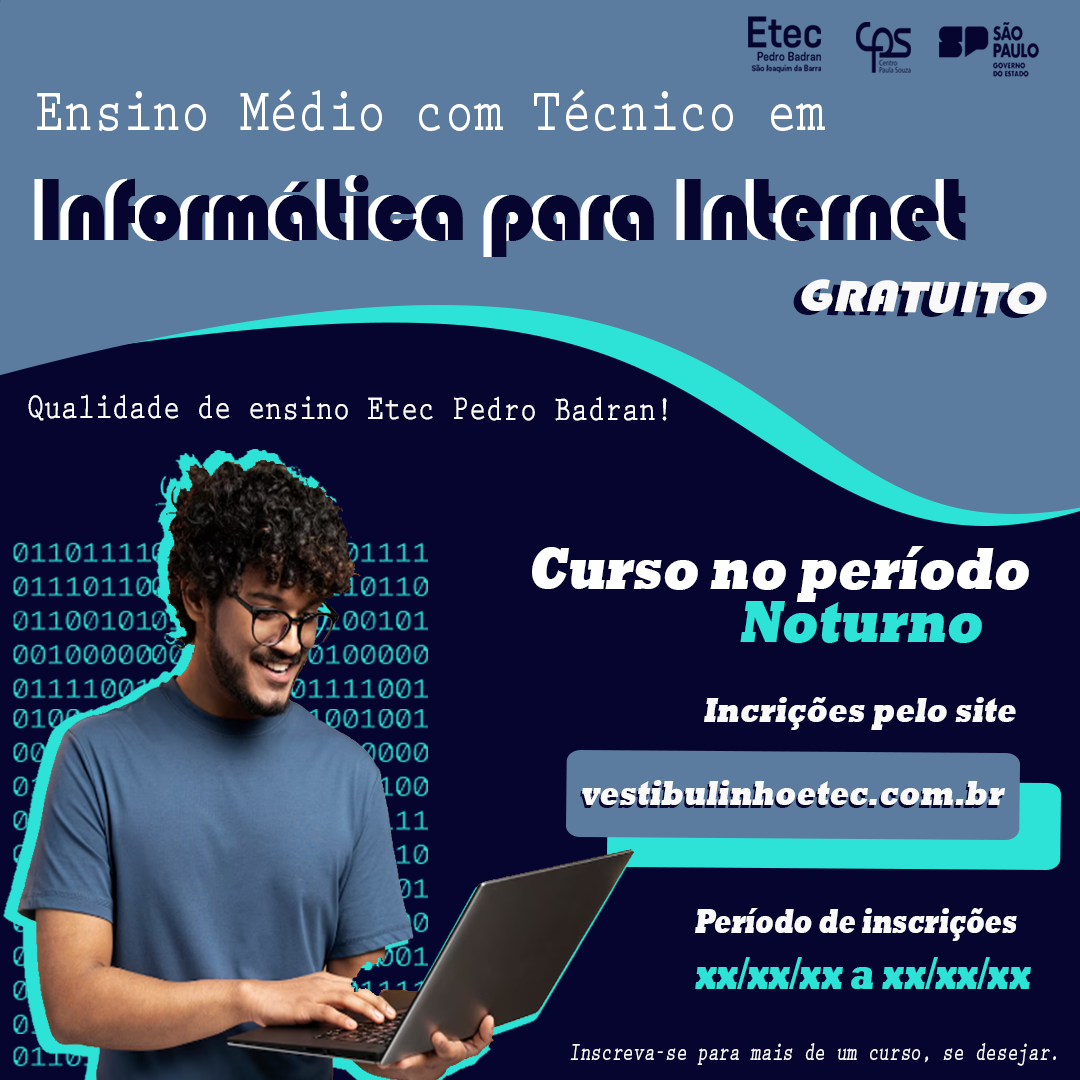
<style>
.page{position:relative;width:1080px;height:1080px;background:#06052f}
.page>*{position:absolute;margin:0}
.t1{font:61px "PrestigeEliteStd-Bd";color:#ffffff;scale:0.8 1}
.t2{font:91.4px "Bauhaus93";color:#06052f;scale:0.9 1}
.t3{font:45.7px "Bauhaus93";color:#f9f9f9;font-style:italic;scale:1.2 1}
.t4{font:35.6px "PrestigeEliteStd-Bd";color:#ffffff;scale:0.8 1}
.t5{font:61px "Rockwell-ExtraBold";color:#ffffff;font-style:italic;scale:0.8 1}
.t6{font:61px "Rockwell-ExtraBold";color:#2de3d8;font-style:italic;scale:0.8 1}
.t7{font:35.6px "Rockwell-ExtraBold";color:#f9f9f9;font-style:italic;scale:0.8 1}
.t8{font:35.6px "Rockwell-ExtraBold";color:#f9f9f9;font-style:italic;scale:0.7 1}
.t9{font:45.7px "Rockwell-ExtraBold";color:#2de3d8;font-style:italic;scale:0.7 1}
.t10{font:25.4px "PrestigeEliteStd-Bd";color:#f9f9f9;font-style:italic;scale:0.7 1}
</style>
<div class="page">
<p class="t1" style="left:37px;top:89px;width:788px;height:43px">Ensino Médio com Técnico em</p>
<p class="t2" style="left:42px;top:175px;width:924px;height:82px">Informática para Internet</p>
<p class="t3" style="left:801px;top:279px;width:246px;height:35px;rotate:1deg">GRATUITO</p>
<p class="t4" style="left:28px;top:394px;width:639px;height:27px">Qualidade de ensino Etec Pedro Badran!</p>
<p class="t5" style="left:532px;top:546px;width:497px;height:56px">Curso no período</p>
<p class="t6" style="left:740px;top:601px;width:242px;height:42px">Noturno</p>
<p class="t7" style="left:704px;top:697px;width:312px;height:33px">Incrições pelo site</p>
<p class="t7" style="left:582px;top:780px;width:423px;height:25px">vestibulinhoetec.com.br</p>
<p class="t8" style="left:695px;top:908px;width:322px;height:33px">Período de inscrições</p>
<p class="t9" style="left:695px;top:957px;width:336px;height:32px">xx/xx/xx a xx/xx/xx</p>
<p class="t10" style="left:570px;top:1043px;width:486px;height:23px">Inscreva-se para mais de um curso, se desejar.</p>
</div>
